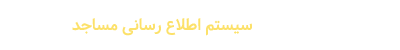
<style>
.page{position:relative;width:400px;height:50px;background:#ffffff}
.page>*{position:absolute;margin:0}
.t1{font:15.8px "Samim-Bold";color:#fce16a}
</style>
<div class="page">
<p class="t1" style="left:72px;top:18px;width:180px;height:18px">سیستم اطلاع رسانی مساجد</p>
</div>
